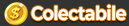
<style>
.page{position:relative;width:129px;height:26px;background:#333333}
.page>*{position:absolute;margin:0}
.t1{font:19.4px "Montserrat-Bold";letter-spacing:-0.04em;color:#ffffff;scale:0.9 1}
</style>
<div class="page">
<p class="t1" style="left:31px;top:4px;width:95px;height:17px">Colectabile</p>
</div>
